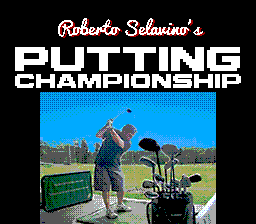
<style>
.page{position:relative;width:256px;height:224px;background:#000000}
.page>*{position:absolute;margin:0}
.t1{font:18px "Pacifico-Regular";color:#ffffff}
.t2{font:14px "M42_FLIGHT-721";color:#ffffff}
.t3{font:24px "M42_FLIGHT-721";color:#ffffff}
</style>
<div class="page">
<p class="t1" style="left:58px;top:18px;width:145px;height:19px">Roberto Selavino’s</p>
<p class="t2" style="left:15px;top:47px;width:226px;height:41px;text-align:center"><span class="t3">PUTTING<br></span>CHAMPIONSHIP</p>
</div>
